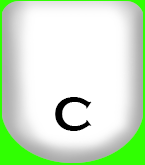
<style>
.page{position:relative;width:145px;height:165px;background:#ffffff}
.page>*{position:absolute;margin:0}
.t1{font:48px "CopperplateGothic-Bold";color:#000000}
</style>
<div class="page">
<p class="t1" style="left:55px;top:97px;width:37px;height:34px">C</p>
</div>
